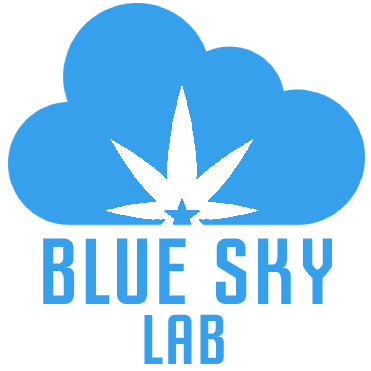
<style>
.page{position:relative;width:371px;height:371px;background:#ffffff}
.page>*{position:absolute;margin:0}
.t1{font:93px "SlimJim";color:#36a0ed}
.t2{font:70px "SlimJim";color:#36a0ed}
</style>
<div class="page">
<p class="t1" style="left:43px;top:238px;width:290px;height:67px">BLUE SKY</p>
<p class="t2" style="left:144px;top:314px;width:80px;height:51px">LAB</p>
</div>
